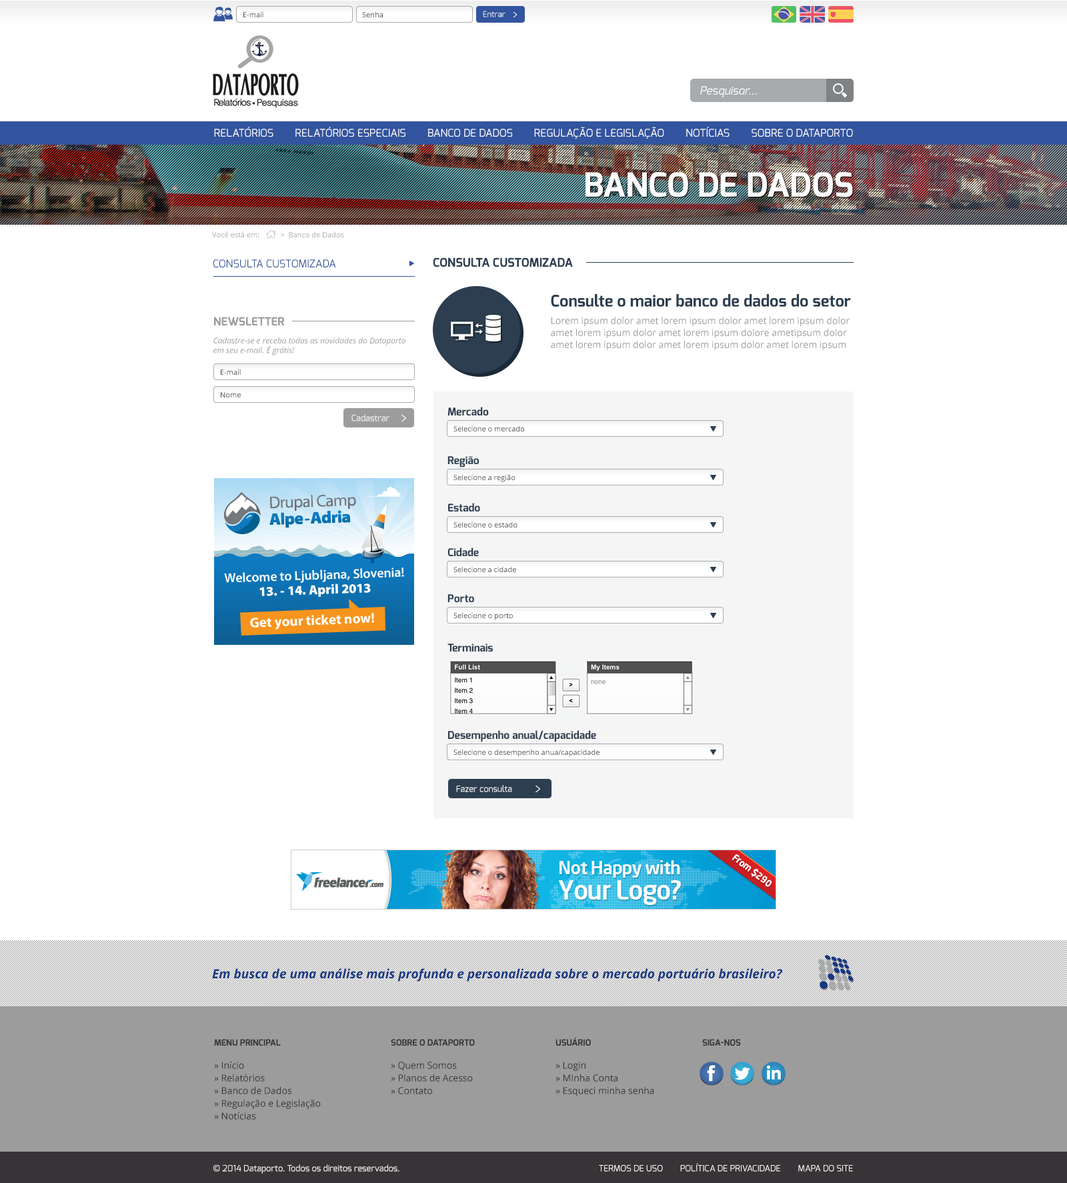
<style>
.page{position:relative;width:1067px;height:1183px;background:#ffffff}
.page>*{position:absolute;margin:0}
.t1{font:7.3px "OpenSans";color:#444043}
.t2{font:8px "Exo-Regular";color:#ffffff}
.t3{font:11.3px "Exo-Italic";color:#ffffff}
.t4{font:10.7px "Exo-Regular";color:#ffffff;text-transform:uppercase}
.t5{font:33.3px "Exo-Bold";color:#ffffff;text-transform:uppercase}
.t6{font:7.3px "OpenSans";color:#a8abad}
.t7{font:12px "Exo-Bold";color:#2c3e50}
.t8{font:10.7px "Exo-Regular";color:#33549e}
.t9{font:16px "Exo-Bold";color:#2c3e50}
.t10{font:11.3px "Exo-Bold";color:#9c9c9c}
.t11{font:9.3px/12px "OpenSans";color:#9c9c9c}
.t12{font:8px "OpenSans-Italic";color:#9c9c9c}
.t13{font:8.7px "Exo-Regular";color:#ffffff}
.t14{font:10.7px "Exo-Bold";color:#2c3e50}
.t15{font:12.7px "OpenSans-BoldItalic";color:#173883}
.t16{font:9.3px/12.7px "OpenSans";color:#383336}
.t17{font:8.7px "Exo-Bold";color:#383336;text-transform:uppercase}
.t18{font:8.7px "Exo-Regular";color:#ffffff;text-transform:uppercase}
</style>
<div class="page">
<p class="t1" style="left:243px;top:11px;width:20px;height:6px">E-mail</p>
<p class="t1" style="left:362px;top:11px;width:21px;height:6px">Senha</p>
<p class="t2" style="left:483px;top:11px;width:22px;height:6px">Entrar</p>
<p class="t3" style="left:700px;top:86px;width:57px;height:12px">Pesquisar...</p>
<p class="t4" style="left:214px;top:127px;width:639px;height:12px">Relatórios        Relatórios Especiais        Banco de Dados        Regulação e Legislação        Notícias        Sobre o Dataporto</p>
<p class="t5" style="left:585px;top:172px;width:268px;height:25px">BANCO DE DADOS</p>
<p class="t6" style="left:212px;top:231px;width:47px;height:6px">Você está em:</p>
<p class="t6" style="left:281px;top:231px;width:63px;height:6px">&gt;  Banco de Dados</p>
<p class="t7" style="left:433px;top:257px;width:140px;height:10px">CONSULTA CUSTOMIZADA</p>
<p class="t8" style="left:213px;top:259px;width:123px;height:9px">CONSULTA CUSTOMIZADA</p>
<p class="t9" style="left:551px;top:294px;width:300px;height:13px">Consulte o maior banco de dados do setor</p>
<p class="t10" style="left:214px;top:317px;width:71px;height:9px">NEWSLETTER</p>
<p class="t11" style="left:551px;top:317px;width:298px;height:33px">Lorem ipsum dolor amet lorem ipsum dolor amet lorem ipsum dolor amet lorem ipsum dolor amet lorem ipsum dolore ametipsum dolor amet lorem ipsum dolor amet lorem ipsum dolor amet lorem ipsum dolor amet.</p>
<p class="t12" style="left:213px;top:337px;width:192px;height:18px">Cadastre-se e receba todas as novidades do Dataporto<br>em seu e-mail. É grátis!</p>
<p class="t1" style="left:221px;top:369px;width:20px;height:6px">E-mail</p>
<p class="t1" style="left:221px;top:392px;width:20px;height:5px">Nome</p>
<p class="t13" style="left:351px;top:414px;width:38px;height:7px">Cadastrar</p>
<p class="t14" style="left:447px;top:407px;width:42px;height:8px">Mercado</p>
<p class="t1" style="left:453px;top:425px;width:71px;height:6px">Selecione o mercado</p>
<p class="t14" style="left:447px;top:456px;width:32px;height:11px">Região</p>
<p class="t1" style="left:453px;top:474px;width:62px;height:8px">Selecione a região</p>
<p class="t14" style="left:448px;top:503px;width:32px;height:8px">Estado</p>
<p class="t1" style="left:453px;top:521px;width:64px;height:6px">Selecione o estado</p>
<p class="t14" style="left:447px;top:547px;width:32px;height:9px">Cidade</p>
<p class="t1" style="left:453px;top:566px;width:63px;height:6px">Selecione a cidade</p>
<p class="t14" style="left:447px;top:594px;width:27px;height:8px">Porto</p>
<p class="t1" style="left:453px;top:612px;width:60px;height:8px">Selecione o porto</p>
<p class="t14" style="left:447px;top:643px;width:46px;height:8px">Terminais</p>
<p class="t14" style="left:448px;top:730px;width:148px;height:12px">Desempenho anual/capacidade</p>
<p class="t1" style="left:453px;top:749px;width:146px;height:8px">Selecione o desempenho anua/capacidade</p>
<p class="t13" style="left:456px;top:785px;width:56px;height:7px">Fazer consulta</p>
<p class="t15" style="left:212px;top:968px;width:570px;height:13px">Em busca de uma análise mais profunda e personalizada sobre o mercado portuário brasileiro?</p>
<p class="t16" style="left:555px;top:1037px;width:99px;height:59px"><span class="t17">usuário<br><br></span>» Login<br>» MInha Conta<br>» Esqueci minha senha</p>
<p class="t16" style="left:214px;top:1039px;width:107px;height:80px"><span class="t17">MENU PRINCIPAL<br><br></span>» Início<br>» Relatórios<br>» Banco de Dados<br>» Regulação e Legislação<br>» Notícias</p>
<p class="t16" style="left:391px;top:1039px;width:84px;height:55px"><span class="t17">SOBRE O DATAPORTO<br><br></span>» Quem Somos<br>» Planos de Acesso<br>» Contato</p>
<p class="t17" style="left:702px;top:1039px;width:39px;height:6px">SIGA-NOS</p>
<p class="t13" style="left:213px;top:1164px;width:186px;height:9px">© 2014 Dataporto. Todos os direitos reservados.</p>
<p class="t18" style="left:599px;top:1163px;width:254px;height:8px">Termos de Uso        Política de Privacidade        Mapa do Site</p>
</div>
